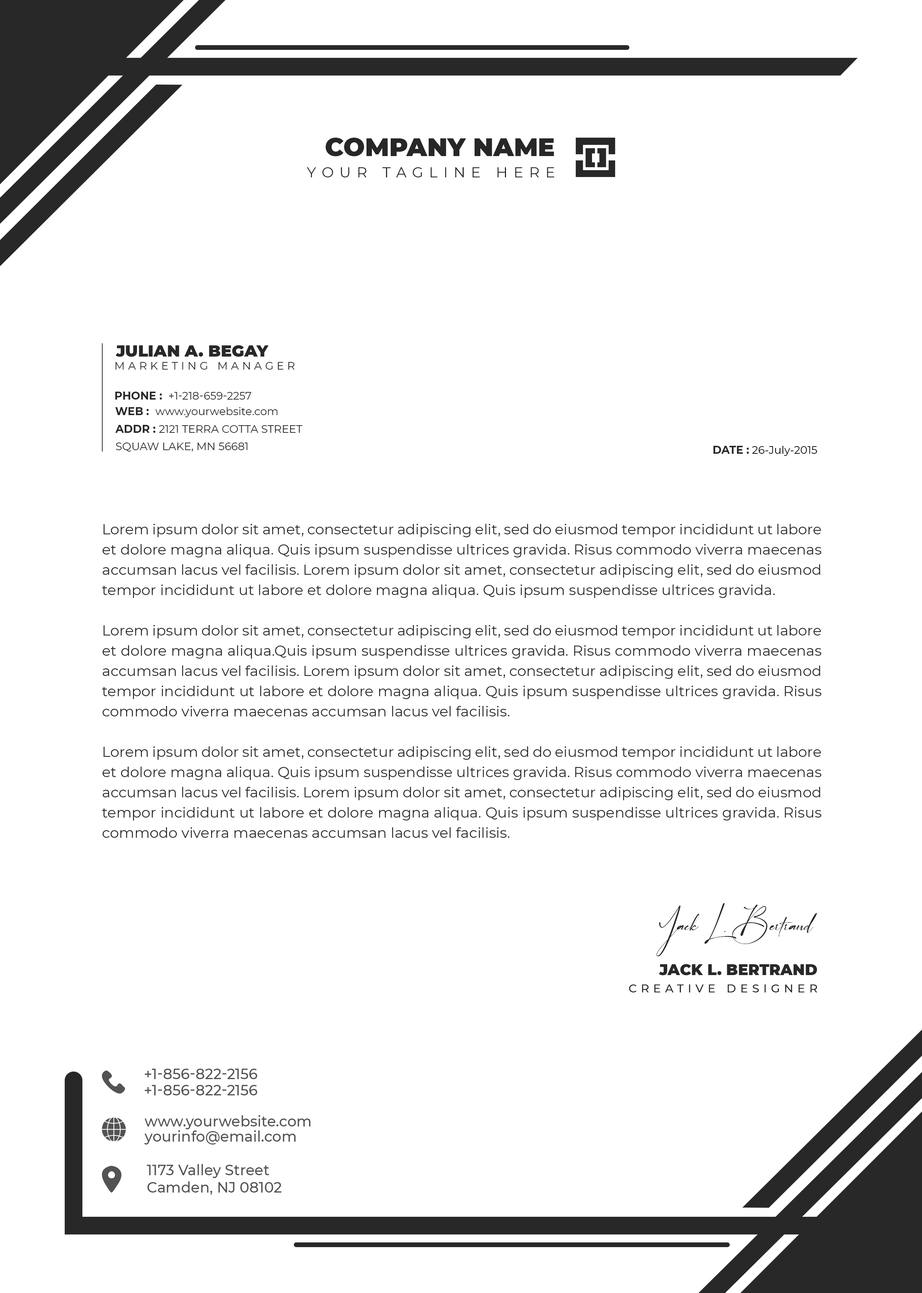
<style>
.page{position:relative;width:922px;height:1293px;background:#ffffff}
.page>*{position:absolute;margin:0}
.t1{font:25.3px "Montserrat-Black";color:#272727;text-transform:uppercase}
.t2{font:14.5px "Montserrat-Regular";letter-spacing:0.4em;color:#272727;text-transform:uppercase}
.t3{font:16.3px "Montserrat-Black";color:#282828;text-transform:uppercase}
.t4{font:10.8px "Montserrat-Regular";letter-spacing:0.3em;color:#282828;text-transform:uppercase}
.t5{font:10.8px "Montserrat-Regular";color:#282828;text-transform:uppercase}
.t6{font:10.8px "Montserrat-Bold";color:#282828;text-transform:uppercase}
.t7{font:10.8px "Montserrat-Regular";color:#282828}
.t8{font:10.8px/17.3px "Montserrat-Regular";color:#282828;text-transform:uppercase}
.t9{font:10.8px/17.3px "Montserrat-Bold";color:#282828;text-transform:uppercase}
.t10{font:10.8px "Montserrat-Regular";color:#000000}
.t11{font:10.8px "Montserrat-Bold";color:#282828}
.t12{font:14.5px/20.2px "Montserrat-Regular";color:#282828}
.t13{font:36.1px "ArinttikaSignatureRegular";color:#282828}
.t14{font:15.2px "Montserrat-Black";color:#282828;text-transform:uppercase}
.t15{font:11.6px "Montserrat-Medium";letter-spacing:0.35em;color:#282828;text-transform:uppercase}
.t16{font:14.5px "Montserrat-Medium";color:#535353;text-transform:uppercase}
.t17{font:14.5px "Montserrat-Medium";color:#535353}
</style>
<div class="page">
<p class="t1" style="left:326px;top:138px;width:228px;height:18px">Company name</p>
<p class="t2" style="left:307px;top:167px;width:247px;height:10px">Your tagline Here</p>
<p class="t3" style="left:115px;top:345px;width:154px;height:12px">Julian A. Begay</p>
<p class="t4" style="left:115px;top:362px;width:180px;height:8px">Marketing manager</p>
<p class="t5" style="left:115px;top:392px;width:136px;height:8px"><span class="t6">PHONE : </span> +1-218-659-2257</p>
<p class="t7" style="left:115px;top:407px;width:163px;height:10px"><span class="t6">WEB :  </span>www.yourwebsite.com</p>
<p class="t8" style="left:115px;top:425px;width:187px;height:27px"><span class="t9">ADDR : </span>2121 Terra Cotta Street<br>Squaw Lake, MN 56681</p>
<p class="t10" style="left:713px;top:446px;width:104px;height:10px"><span class="t11">DATE : </span>26-July-2015</p>
<p class="t12" style="left:102px;top:524px;width:719px;height:314px;text-align:justify">Lorem ipsum dolor sit amet, consectetur adipiscing elit, sed do eiusmod tempor incididunt ut labore et dolore magna aliqua. Quis ipsum suspendisse ultrices gravida. Risus commodo viverra maecenas accumsan lacus vel facilisis. Lorem ipsum dolor sit amet, consectetur adipiscing elit, sed do eiusmod tempor incididunt ut labore et dolore magna aliqua. Quis ipsum suspendisse ultrices gravida. <br><br>Lorem ipsum dolor sit amet, consectetur adipiscing elit, sed do eiusmod tempor incididunt ut labore et dolore magna aliqua.Quis ipsum suspendisse ultrices gravida. Risus commodo viverra maecenas accumsan lacus vel facilisis. Lorem ipsum dolor sit amet, consectetur adipiscing elit, sed do eiusmod tempor incididunt ut labore et dolore magna aliqua. Quis ipsum suspendisse ultrices gravida. Risus commodo viverra maecenas accumsan lacus vel facilisis. <br><br>Lorem ipsum dolor sit amet, consectetur adipiscing elit, sed do eiusmod tempor incididunt ut labore et dolore magna aliqua. Quis ipsum suspendisse ultrices gravida. Risus commodo viverra maecenas accumsan lacus vel facilisis. Lorem ipsum dolor sit amet, consectetur adipiscing elit, sed do eiusmod tempor incididunt ut labore et dolore magna aliqua. Quis ipsum suspendisse ultrices gravida. Risus commodo viverra maecenas accumsan lacus vel facilisis.</p>
<p class="t13" style="left:656px;top:903px;width:161px;height:54px">Jack L. Bertrand</p>
<p class="t14" style="left:659px;top:964px;width:158px;height:12px">Jack L. Bertrand</p>
<p class="t15" style="left:629px;top:985px;width:188px;height:8px">creative designer</p>
<p class="t16" style="left:145px;top:1069px;width:112px;height:10px">+1-856-822-2156</p>
<p class="t16" style="left:145px;top:1085px;width:112px;height:11px">+1-856-822-2156</p>
<p class="t17" style="left:145px;top:1115px;width:165px;height:15px">www.yourwebsite.com</p>
<p class="t17" style="left:144px;top:1130px;width:152px;height:15px">yourinfo@email.com</p>
<p class="t17" style="left:147px;top:1164px;width:135px;height:31px">1173 Valley Street<br>Camden, NJ 08102</p>
</div>
